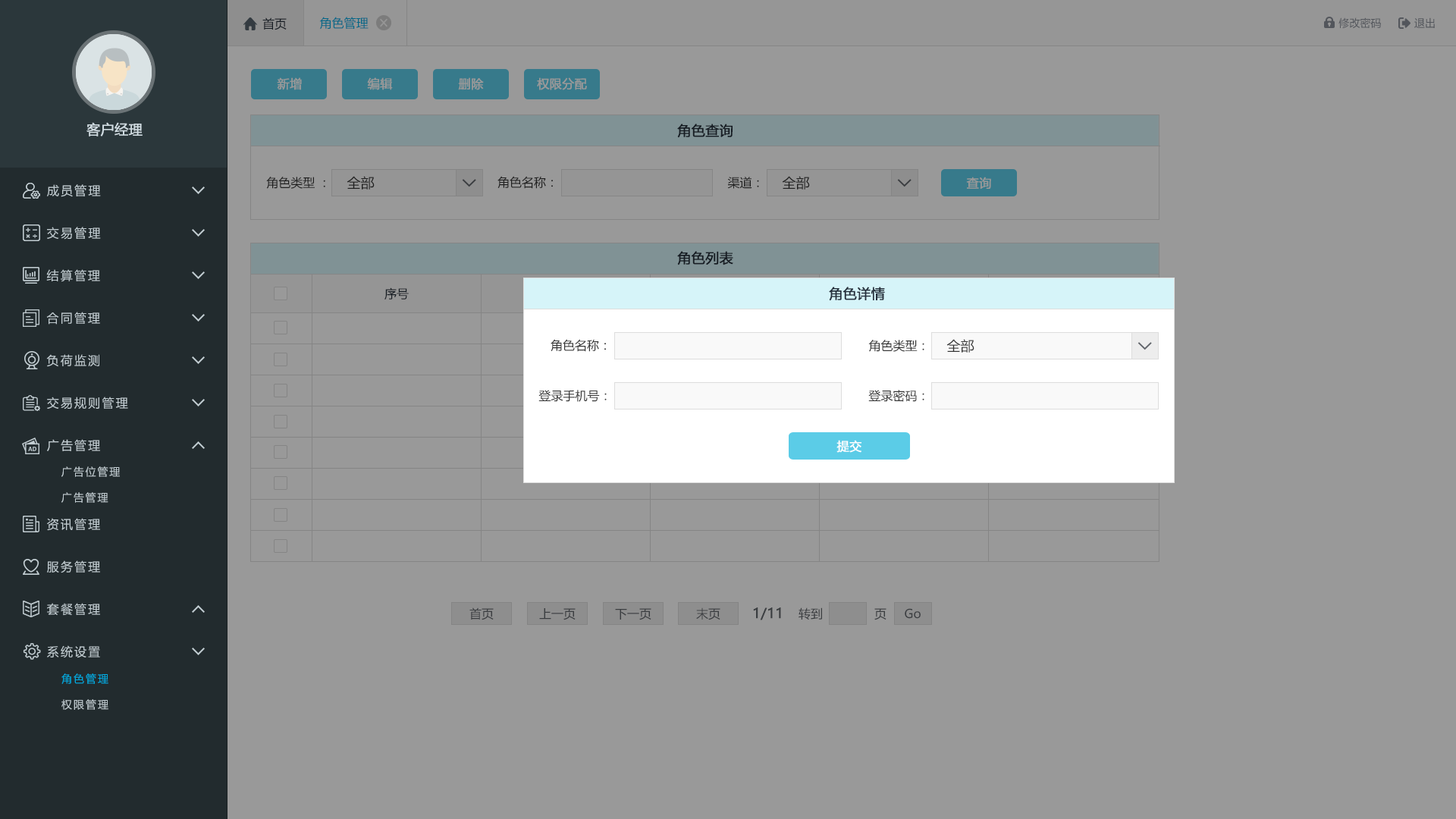
<style>
.page{position:relative;width:1456px;height:819px;background:#999999}
.page>*{position:absolute;margin:0}
.t1{font:12.1px "MicrosoftYaHei";color:#242e3b}
.t2{font:12.1px "MicrosoftYaHei";color:#006788}
.t3{font:10.6px "MicrosoftYaHei";color:#53565c}
.t4{font:12.1px "MicrosoftYaHei";color:#999999;font-weight:bold}
.t5{font:13.6px "MicrosoftYaHei";color:#d1dce2;font-weight:bold}
.t6{font:13.6px "MicrosoftYaHei";color:#242e3b;font-weight:bold}
.t7{font:12.1px "MicrosoftYaHei";letter-spacing:0.14em;color:#c2cdd2}
.t8{font:12.1px "MicrosoftYaHei";color:#333333}
.t9{font:13.6px "MicrosoftYaHei";color:#333333}
.t10{font:12.1px "MicrosoftYaHei";color:#ffffff;font-weight:bold}
.t11{font:10.6px "MicrosoftYaHei";letter-spacing:0.14em;color:#c2cdd2}
.t12{font:12.1px "MicrosoftYaHei";color:#3a3d40}
.t13{font:13.6px "MicrosoftYaHei";color:#3a3d40;font-weight:bold}
.t14{font:10.6px "MicrosoftYaHei";letter-spacing:0.14em;color:#00ace2}
</style>
<div class="page">
<p class="t1" style="left:262px;top:17px;width:25px;height:13px">首页</p>
<p class="t2" style="left:319px;top:17px;width:50px;height:13px">角色管理</p>
<p class="t3" style="left:1338px;top:17px;width:43px;height:12px">修改密码</p>
<p class="t3" style="left:1414px;top:17px;width:21px;height:11px">退出</p>
<p class="t4" style="left:277px;top:77px;width:25px;height:13px">新增</p>
<p class="t4" style="left:367px;top:77px;width:26px;height:13px">编辑</p>
<p class="t4" style="left:458px;top:77px;width:26px;height:13px">删除</p>
<p class="t4" style="left:537px;top:77px;width:50px;height:13px">权限分配</p>
<p class="t5" style="left:86px;top:122px;width:57px;height:14px">客户经理</p>
<p class="t6" style="left:677px;top:124px;width:56px;height:14px">角色查询</p>
<p class="t7" style="left:47px;top:184px;width:54px;height:13px">成员管理</p>
<p class="t8" style="left:266px;top:177px;width:59px;height:12px">角色类型 ：</p>
<p class="t9" style="left:347px;top:176px;width:28px;height:14px">全部</p>
<p class="t8" style="left:497px;top:176px;width:56px;height:13px">角色名称：</p>
<p class="t8" style="left:727px;top:177px;width:32px;height:12px">渠道：</p>
<p class="t9" style="left:782px;top:176px;width:28px;height:14px">全部</p>
<p class="t4" style="left:966px;top:177px;width:25px;height:12px">查询</p>
<p class="t7" style="left:47px;top:227px;width:54px;height:13px">交易管理</p>
<p class="t6" style="left:677px;top:251px;width:56px;height:14px">角色列表</p>
<p class="t7" style="left:46px;top:269px;width:54px;height:13px">结算管理</p>
<p class="t1" style="left:384px;top:287px;width:25px;height:13px">序号</p>
<p class="t6" style="left:829px;top:287px;width:56px;height:14px">角色详情</p>
<p class="t7" style="left:46px;top:312px;width:54px;height:13px">合同管理</p>
<p class="t8" style="left:551px;top:339px;width:55px;height:13px">角色名称：</p>
<p class="t8" style="left:868px;top:340px;width:56px;height:12px">角色类型：</p>
<p class="t9" style="left:946px;top:339px;width:28px;height:14px">全部</p>
<p class="t7" style="left:46px;top:354px;width:53px;height:13px">负荷监测</p>
<p class="t8" style="left:538px;top:390px;width:69px;height:12px">登录手机号：</p>
<p class="t8" style="left:868px;top:390px;width:56px;height:12px">登录密码：</p>
<p class="t7" style="left:47px;top:397px;width:81px;height:12px">交易规则管理</p>
<p class="t7" style="left:47px;top:439px;width:53px;height:12px">广告管理</p>
<p class="t10" style="left:836px;top:440px;width:25px;height:13px">提交</p>
<p class="t11" style="left:61px;top:466px;width:59px;height:11px">广告位管理</p>
<p class="t11" style="left:61px;top:492px;width:47px;height:11px">广告管理</p>
<p class="t7" style="left:47px;top:518px;width:53px;height:13px">资讯管理</p>
<p class="t7" style="left:47px;top:560px;width:53px;height:13px">服务管理</p>
<p class="t7" style="left:47px;top:603px;width:53px;height:13px">套餐管理</p>
<p class="t12" style="left:469px;top:607px;width:25px;height:13px">首页</p>
<p class="t12" style="left:539px;top:608px;width:37px;height:12px">上一页</p>
<p class="t12" style="left:615px;top:608px;width:36px;height:12px">下一页</p>
<p class="t12" style="left:696px;top:607px;width:24px;height:13px">末页</p>
<p class="t13" style="left:753px;top:607px;width:28px;height:13px">1/11</p>
<p class="t12" style="left:799px;top:607px;width:23px;height:13px">转到</p>
<p class="t12" style="left:874px;top:608px;width:12px;height:12px">页</p>
<p class="t12" style="left:905px;top:608px;width:16px;height:11px">Go</p>
<p class="t7" style="left:47px;top:645px;width:53px;height:13px">系统设置</p>
<p class="t14" style="left:61px;top:673px;width:47px;height:11px">角色管理</p>
<p class="t11" style="left:61px;top:699px;width:47px;height:11px">权限管理</p>
</div>
